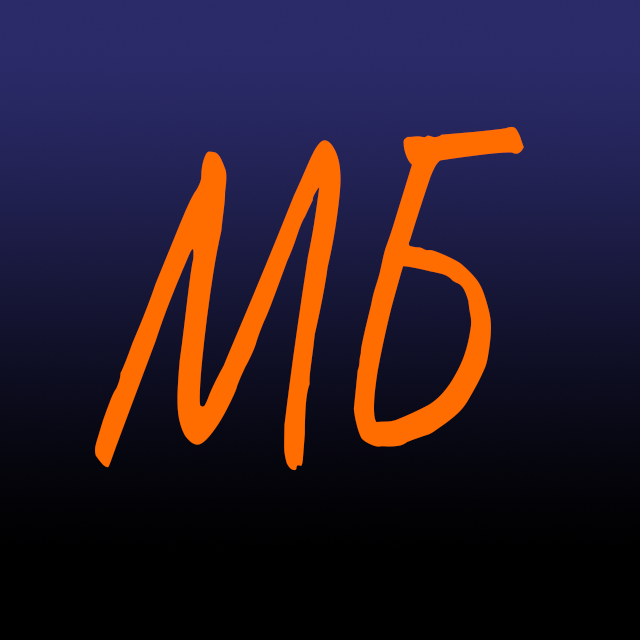
<style>
.page{position:relative;width:640px;height:640px}
.page>*{position:absolute;margin:0}
.t1{font:459.8px "Caveat-Regular";color:#ff6c00;scale:0.7 1}
</style>
<div class="page">
<p class="t1" style="left:95px;top:126px;width:429px;height:345px">МБ</p>
</div>
